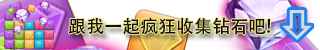
<style>
.page{position:relative;width:320px;height:50px}
.page>*{position:absolute;margin:0}
.t1{font:18px "AdobeHeitiStd-Regular";color:#23080f}
</style>
<div class="page">
<p class="t1" style="left:68px;top:17px;width:203px;height:18px">跟我一起疯狂收集钻石吧!</p>
</div>
